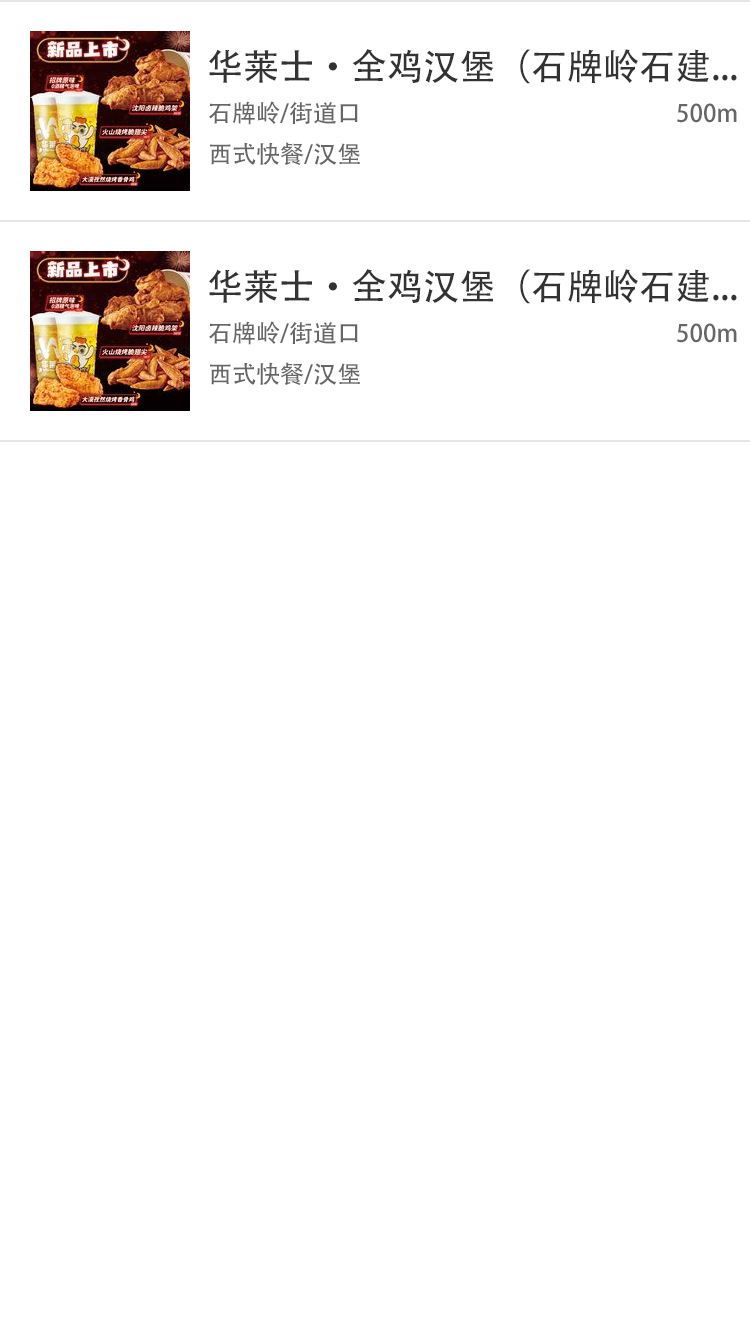
<style>
.page{position:relative;width:750px;height:1334px;background:#ffffff}
.page>*{position:absolute;margin:0}
.t1{font:36px "AdobeHeitiStd-Regular";color:#333333}
.t2{font:24px "AdobeHeitiStd-Regular";color:#666666}
</style>
<div class="page">
<p class="t1" style="left:209px;top:49px;width:528px;height:35px">华莱士·全鸡汉堡（石牌岭石建...</p>
<p class="t2" style="left:209px;top:101px;width:149px;height:24px">石牌岭/街道口</p>
<p class="t2" style="left:677px;top:103px;width:60px;height:20px">500m</p>
<p class="t2" style="left:210px;top:142px;width:150px;height:23px">西式快餐/汉堡</p>
<p class="t1" style="left:209px;top:269px;width:528px;height:35px">华莱士·全鸡汉堡（石牌岭石建...</p>
<p class="t2" style="left:209px;top:321px;width:149px;height:24px">石牌岭/街道口</p>
<p class="t2" style="left:677px;top:323px;width:60px;height:20px">500m</p>
<p class="t2" style="left:210px;top:362px;width:150px;height:23px">西式快餐/汉堡</p>
</div>
